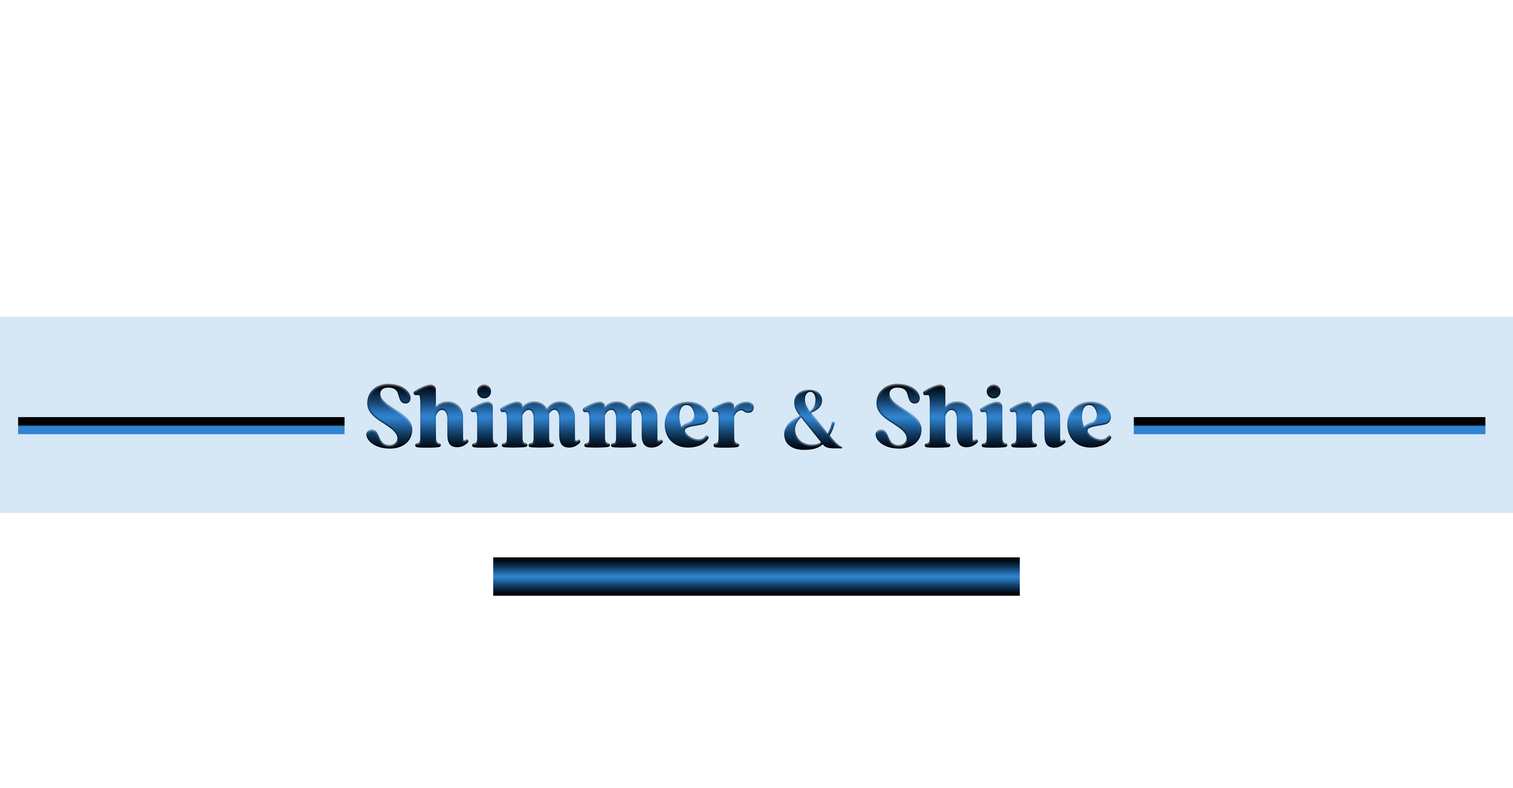
<style>
.page{position:relative;width:1513px;height:788px;background:#ffffff}
.page>*{position:absolute;margin:0}
.t1{font:97.4px "lengthwise-Regular"}
</style>
<div class="page">
<p class="t1" style="left:366px;top:384px;width:746px;height:66px">Shimmer &amp; Shine</p>
</div>
